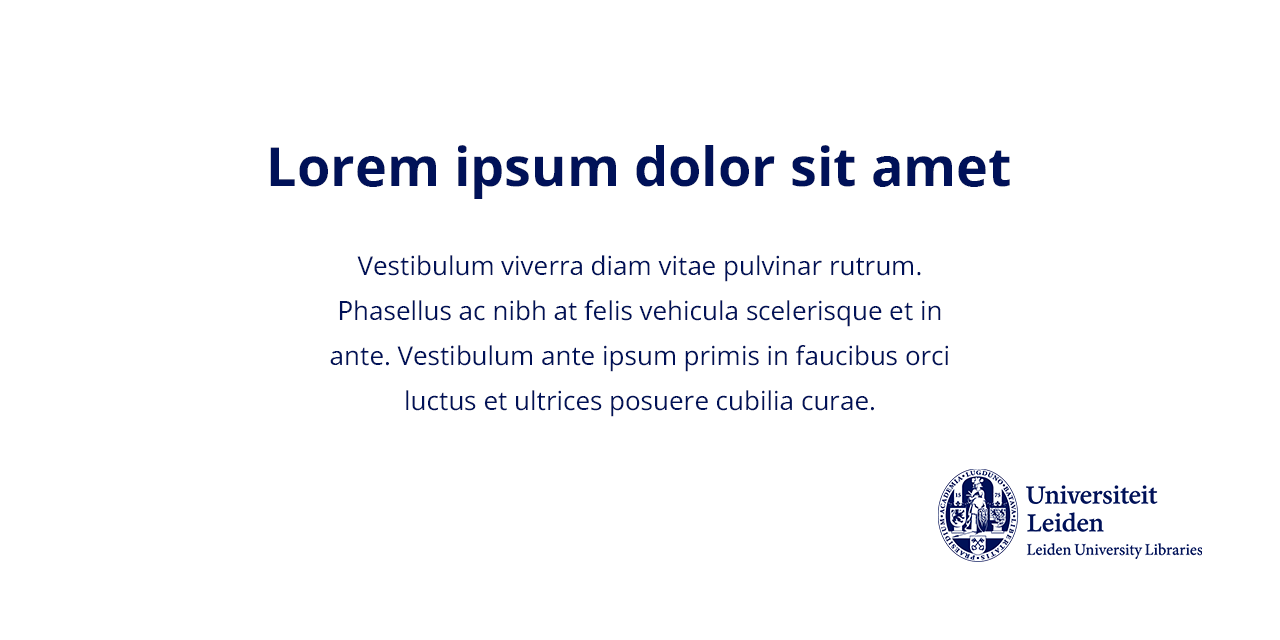
<style>
.page{position:relative;width:1280px;height:640px;background:#ffffff}
.page>*{position:absolute;margin:0}
.t1{font:54px "OpenSansRoman-Bold";color:#001158}
.t2{font:26px/45px "OpenSans-Regular";color:#001158}
</style>
<div class="page">
<p class="t1" style="left:270px;top:145px;width:740px;height:54px">Lorem ipsum dolor sit amet</p>
<p class="t2" style="left:330px;top:255px;width:618px;height:162px;text-align:center">Vestibulum viverra diam vitae pulvinar rutrum. Phasellus ac nibh at felis vehicula scelerisque et in ante. Vestibulum ante ipsum primis in faucibus orci luctus et ultrices posuere cubilia curae.</p>
</div>
